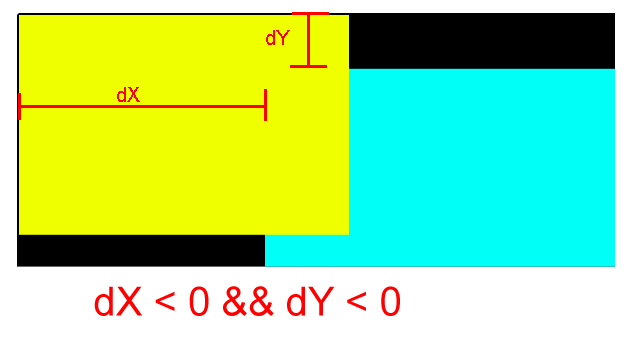
<style>
.page{position:relative;width:629px;height:342px;background:#f0ff00}
.page>*{position:absolute;margin:0}
.t1{font:20px "ArialMT";color:#ff0000}
.t2{font:40px "ArialMT";color:#ff0000}
</style>
<div class="page">
<p class="t1" style="left:266px;top:30px;width:24px;height:15px">dY</p>
<p class="t1" style="left:117px;top:87px;width:23px;height:15px">dX</p>
<p class="t2" style="left:94px;top:286px;width:306px;height:30px">dX &lt; 0 &amp;&amp; dY &lt; 0</p>
</div>
